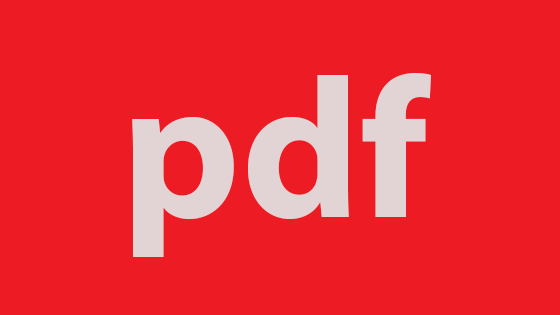
<style>
.page{position:relative;width:560px;height:315px;background:#ed1c24}
.page>*{position:absolute;margin:0}
.t1{font:200px "MyriadPro-Bold";color:#e2d4d4}
</style>
<div class="page">
<p class="t1" style="left:132px;top:73px;width:299px;height:184px">pdf</p>
</div>
